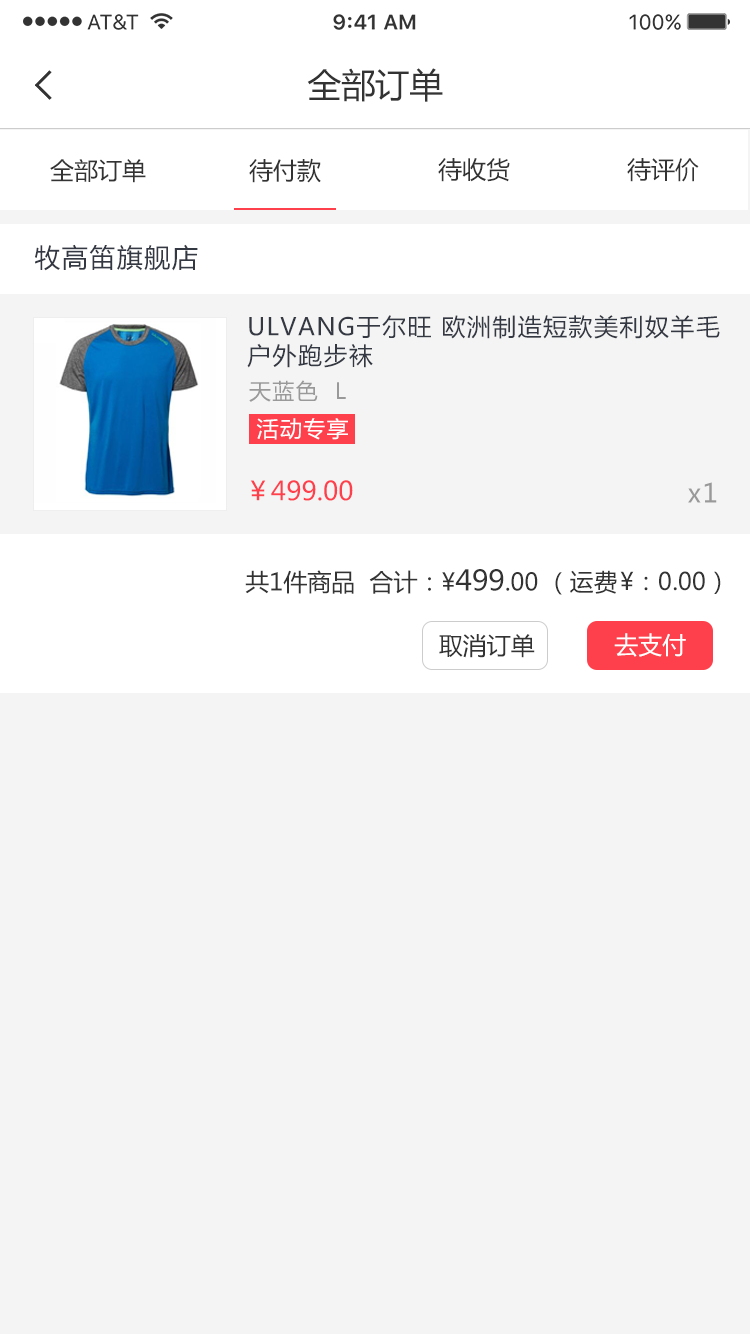
<style>
.page{position:relative;width:750px;height:1334px;background:#f4f4f4}
.page>*{position:absolute;margin:0}
.t1{font:34px "MicrosoftYaHei";color:#333333}
.t2{font:24px "MicrosoftYaHei";color:#333333}
.t3{font:26px "MicrosoftYaHei";letter-spacing:0.06em;color:#343843}
.t4{font:24px "MicrosoftYaHei";letter-spacing:0.06em;color:#343843}
.t5{font:22px "MicrosoftYaHei";letter-spacing:0.06em;color:#999999}
.t6{font:22px "MicrosoftYaHei";letter-spacing:0.06em;color:#ffffff}
.t7{font:26px "MicrosoftYaHei";color:#fe404c}
.t8{font:26px "MicrosoftYaHei";letter-spacing:0.06em;color:#999999}
.t9{font:28px "MicrosoftYaHei";color:#333333}
.t10{font:24px "MicrosoftYaHei";color:#ffffff}
</style>
<div class="page">
<p class="t1" style="left:307px;top:68px;width:136px;height:34px">全部订单</p>
<p class="t2" style="left:50px;top:159px;width:96px;height:24px">全部订单</p>
<p class="t2" style="left:249px;top:158px;width:72px;height:25px">待付款</p>
<p class="t2" style="left:438px;top:158px;width:72px;height:24px">待收货</p>
<p class="t2" style="left:627px;top:158px;width:72px;height:24px">待评价</p>
<p class="t3" style="left:35px;top:244px;width:163px;height:27px">牧高笛旗舰店</p>
<p class="t4" style="left:247px;top:315px;width:473px;height:53px">ULVANG于尔旺 欧洲制造短款美利奴羊毛户外跑步袜</p>
<p class="t5" style="left:249px;top:380px;width:97px;height:22px">天蓝色  L</p>
<p class="t6" style="left:256px;top:418px;width:92px;height:22px">活动专享</p>
<p class="t7" style="left:250px;top:480px;width:103px;height:21px">￥499.00</p>
<p class="t8" style="left:688px;top:482px;width:29px;height:21px">x1</p>
<p class="t2" style="left:245px;top:569px;width:372px;height:26px">共1件商品  合计：¥<span class="t9">499</span>.00 （运费</p>
<p class="t2" style="left:620px;top:571px;width:101px;height:23px">¥：0.00）</p>
<p class="t2" style="left:439px;top:634px;width:96px;height:24px">取消订单</p>
<p class="t10" style="left:614px;top:633px;width:72px;height:24px">去支付</p>
</div>
